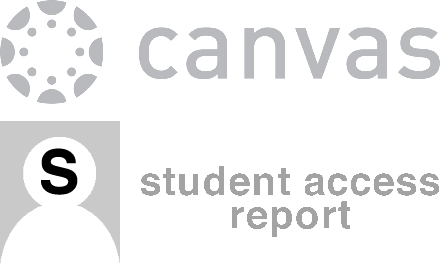
<style>
.page{position:relative;width:440px;height:280px;background:#ffffff}
.page>*{position:absolute;margin:0}
.t1{font:60px "Helvetica-Bold";color:#000000;font-weight:bold}
.t2{font:40px/33.6px "Helvetica-Bold";color:#a4a4a4;font-weight:bold}
</style>
<div class="page">
<p class="t1" style="left:41px;top:148px;width:37px;height:47px">S</p>
<p class="t2" style="left:140px;top:166px;width:300px;height:72px;text-align:center">student access<br>report</p>
</div>
